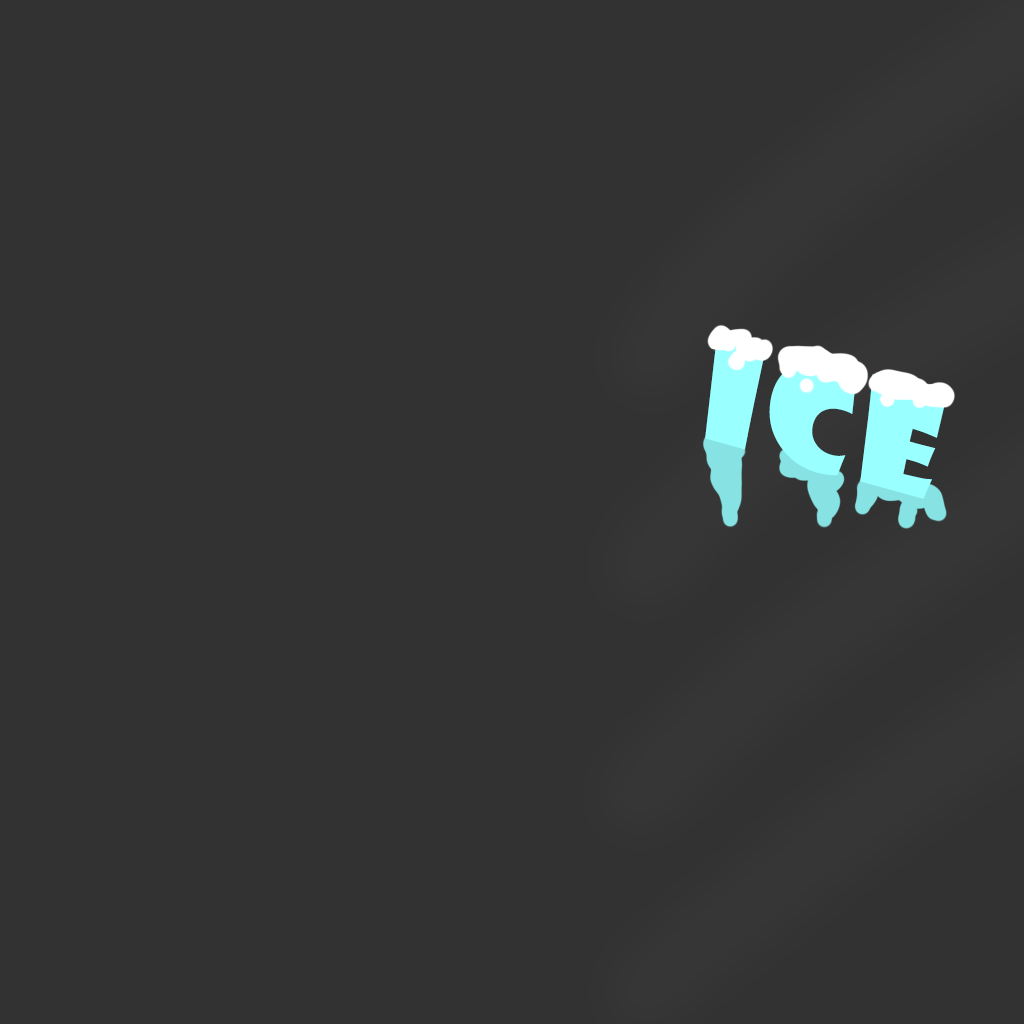
<style>
.page{position:relative;width:1024px;height:1024px;background:#323232}
.page>*{position:absolute;margin:0}
.t1{font:142.5px "ShowcardGothic-Reg";letter-spacing:0.05em;color:#99ffff;scale:1.05 1}
</style>
<div class="page">
<p class="t1" style="left:705px;top:331px;width:242px;height:168px;rotate:15deg">ICE</p>
</div>
